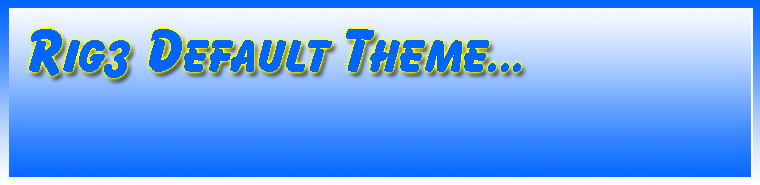
<style>
.page{position:relative;width:760px;height:185px}
.page>*{position:absolute;margin:0}
.t1{font:64px "BILLY-Normal";color:#0064ff}
</style>
<div class="page">
<p class="t1" style="left:29px;top:29px;width:492px;height:49px">Rig3 Default Theme...</p>
</div>
